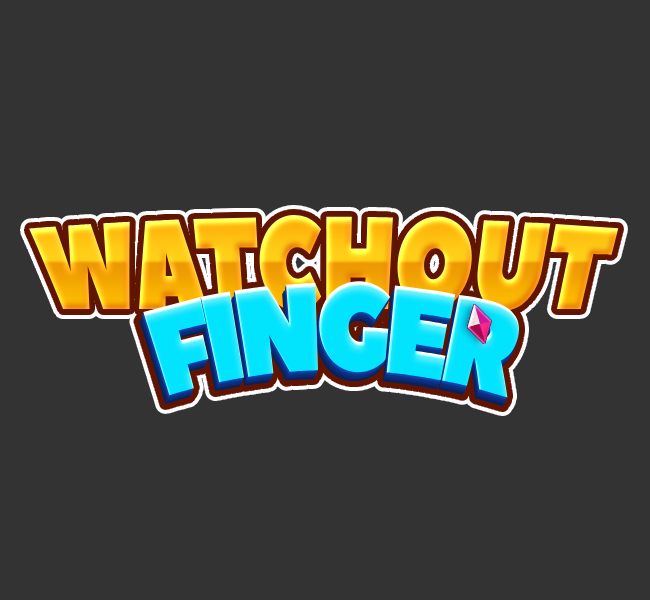
<style>
.page{position:relative;width:650px;height:600px;background:#333333}
.page>*{position:absolute;margin:0}
.t1{font:115px "PeaceSans";letter-spacing:-0.025em;scale:0.83 1}
.t2{font:124.6px "PeaceSans";letter-spacing:-0.075em;color:#02e3fd;scale:0.77 1}
</style>
<div class="page">
<p class="t1" style="left:29px;top:214px;width:590px;height:97px">WATCHOUT</p>
<p class="t2" style="left:143px;top:281px;width:377px;height:117px">FINGER</p>
</div>
